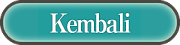
<style>
.page{position:relative;width:180px;height:45px}
.page>*{position:absolute;margin:0}
.t1{font:26px "RyuminPro-ExBold";letter-spacing:-0.08em;color:#ffffff;scale:0.9 1}
</style>
<div class="page">
<p class="t1" style="left:50px;top:13px;width:81px;height:20px">Kembali</p>
</div>
